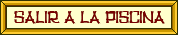
<style>
.page{position:relative;width:178px;height:35px;background:#ffffcc}
.page>*{position:absolute;margin:0}
.t1{font:17.5px "TikiHut";color:#770000;scale:0.94 1}
</style>
<div class="page">
<p class="t1" style="left:14px;top:11px;width:151px;height:13px">salir a la piscina</p>
<p class="t1" style="left:14px;top:11px;width:151px;height:13px">salir a la piscina</p>
</div>
